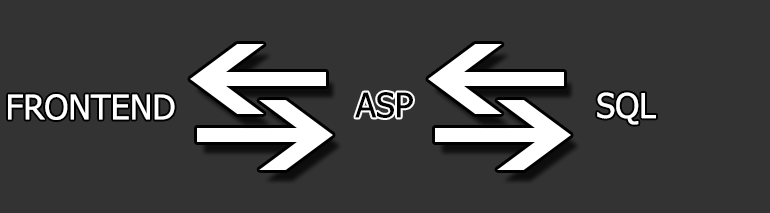
<style>
.page{position:relative;width:770px;height:213px;background:#333333}
.page>*{position:absolute;margin:0}
.t1{font:34px "Tahoma";color:#ffffff}
.t2{font:34px "Tahoma";color:#000000}
.t3{font:34.1px "Tahoma";color:#ffffff}
</style>
<div class="page">
<p class="t1" style="left:8px;top:94px;width:167px;height:26px">FRONTEND</p>
<p class="t2" style="left:355px;top:92px;width:58px;height:26px">ASP</p>
<p class="t3" style="left:597px;top:92px;width:59px;height:33px">SQL</p>
</div>
